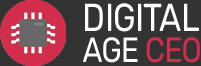
<style>
.page{position:relative;width:201px;height:66px;background:#333333}
.page>*{position:absolute;margin:0}
.t1{font:39px/31px "Rubik-Regular";letter-spacing:-0.02em;color:#ffffff;scale:0.85 1}
.t2{font:35px/31px "Rubik-Regular";letter-spacing:-0.02em;color:#ffffff;scale:0.85 1}
.t3{font:35px/31px "Rubik-Regular";letter-spacing:-0.02em;color:#d32d4c;scale:0.85 1}
</style>
<div class="page">
<p class="t1" style="left:83px;top:3px;width:117px;height:60px">DIGITAL<br><span class="t2">AGE </span><span class="t3">CEO</span></p>
</div>
